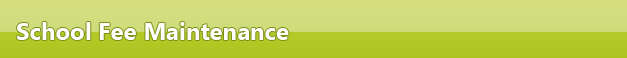
<style>
.page{position:relative;width:627px;height:58px}
.page>*{position:absolute;margin:0}
.t1{font:24px "SegoeUI-Bold";color:#fefefe}
</style>
<div class="page">
<p class="t1" style="left:17px;top:22px;width:272px;height:18px">School Fee Maintenance</p>
</div>
